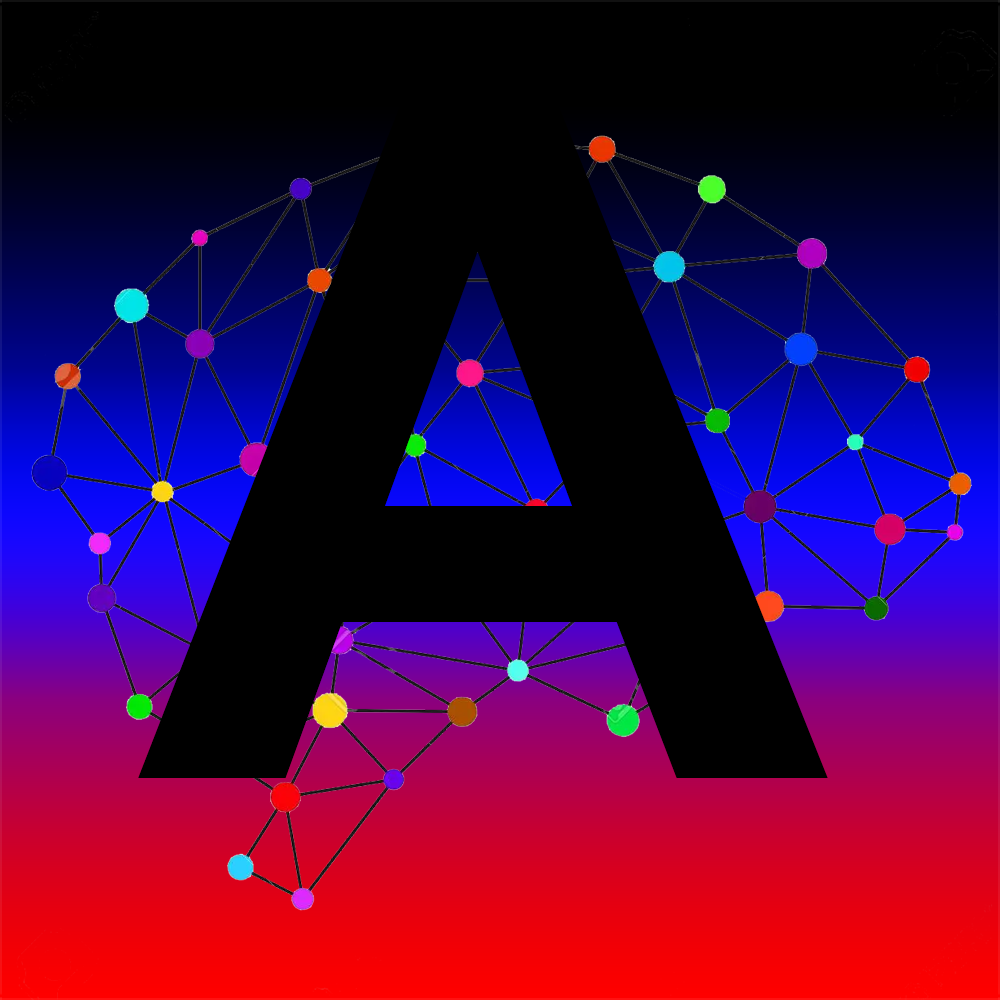
<style>
.page{position:relative;width:1000px;height:1000px;background:#000000}
.page>*{position:absolute;margin:0}
.t1{font:959.4px "Arial-BoldMT";color:#000000}
</style>
<div class="page">
<p class="t1" style="left:138px;top:91px;width:690px;height:687px">A</p>
</div>
